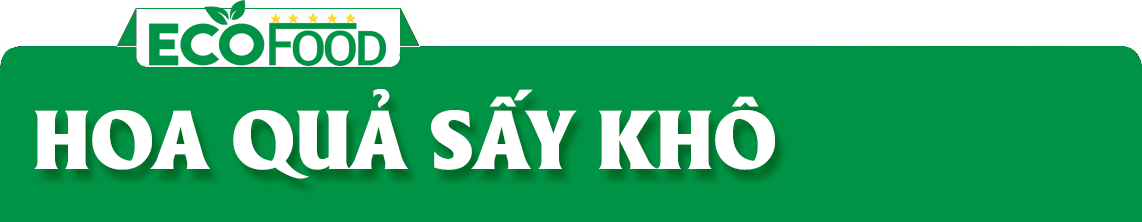
<style>
.page{position:relative;width:1142px;height:222px;background:#009345}
.page>*{position:absolute;margin:0}
.t1{font:81px "UTM-Alberta-Heavy";color:#ffffff}
</style>
<div class="page">
<p class="t1" style="left:34px;top:89px;width:741px;height:90px">HOA QUẢ SẤY KHÔ</p>
</div>
